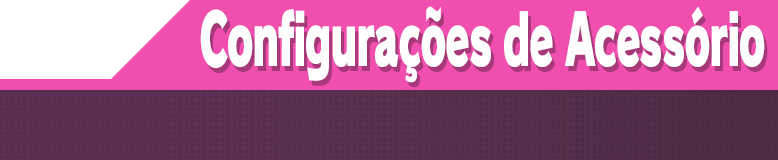
<style>
.page{position:relative;width:778px;height:160px;background:#f14faf}
.page>*{position:absolute;margin:0}
.t1{font:70.7px "RodinPro-UB";letter-spacing:-0.035em;color:#fffeff;scale:0.56 1}
</style>
<div class="page">
<p class="t1" style="left:200px;top:6px;width:565px;height:77px">Configurações de Acessório</p>
</div>
